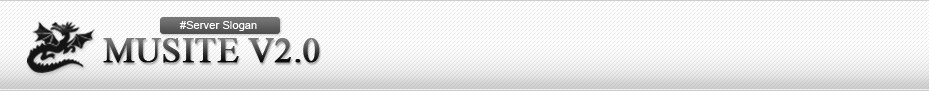
<style>
.page{position:relative;width:929px;height:91px;background:#fefefe}
.page>*{position:absolute;margin:0}
.t1{font:10.7px "ArialMT";letter-spacing:0.025em;color:#ffffff}
.t2{font:35px "TimesNewRomanPSMT";text-transform:uppercase;font-weight:bold}
</style>
<div class="page">
<p class="t1" style="left:179px;top:21px;width:78px;height:10px">#Server Slogan</p>
<p class="t2" style="left:103px;top:38px;width:217px;height:25px">Musite v2.0</p>
</div>
